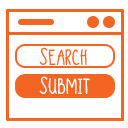
<style>
.page{position:relative;width:128px;height:128px;background:#ffffff}
.page>*{position:absolute;margin:0}
.t1{font:19px "DJBSandShoesandaFezBold-Bold";color:#f26522}
.t2{font:19px "DJBSandShoesandaFezBold-Bold";color:#ffffff}
</style>
<div class="page">
<p class="t1" style="left:39px;top:47px;width:48px;height:18px">Search</p>
<p class="t2" style="left:39px;top:76px;width:51px;height:18px">Submit</p>
</div>
